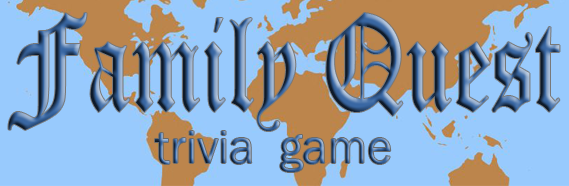
<style>
.page{position:relative;width:569px;height:186px;background:#98cafd}
.page>*{position:absolute;margin:0}
.t1{font:134.4px "OldEnglishTextMT";scale:0.71 1}
.t2{font:48px "FranklinGothic-Book"}
</style>
<div class="page">
<p class="t1" style="left:8px;top:13px;width:552px;height:118px">Family Quest</p>
<p class="t2" style="left:155px;top:131px;width:236px;height:41px">trivia  game</p>
</div>
